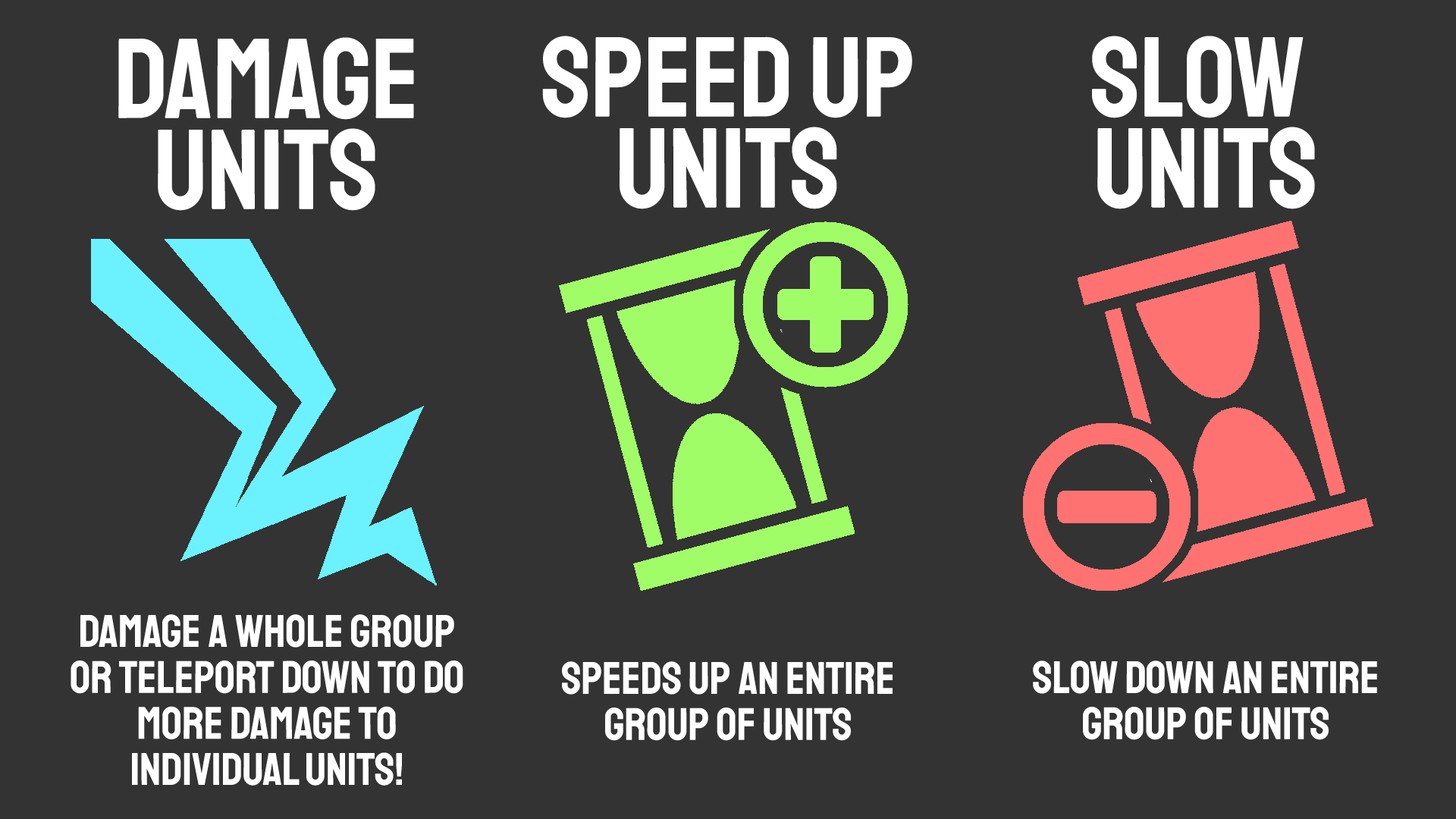
<style>
.page{position:relative;width:1456px;height:819px;background:#333333}
.page>*{position:absolute;margin:0}
.t1{font:113.7px "Staatliches-Regular";color:#ffffff}
.t2{font:113.7px/91px "Staatliches-Regular";color:#ffffff}
.t3{font:45.5px/46px "Staatliches-Regular";color:#ffffff}
</style>
<div class="page">
<p class="t1" style="left:118px;top:37px;width:296px;height:174px">Damage Units</p>
<p class="t1" style="left:542px;top:36px;width:370px;height:173px">Speed Up Units</p>
<p class="t2" style="left:1092px;top:36px;width:223px;height:173px;text-align:center">Slow<br> Units</p>
<p class="t3" style="left:71px;top:614px;width:392px;height:172px;text-align:center">Damage a whole group or teleport down to do more damage to individual units!</p>
<p class="t3" style="left:562px;top:661px;width:331px;height:80px;text-align:center">Speeds up an entire group of units</p>
<p class="t3" style="left:1033px;top:660px;width:344px;height:80px;text-align:center">Slow down an entire group of units</p>
</div>
